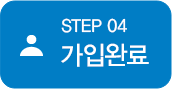
<style>
.page{position:relative;width:172px;height:89px;background:#007dc5}
.page>*{position:absolute;margin:0}
.t1{font:18px "YDVYGO33";color:#ffffff;scale:0.95 1}
.t2{font:26px "YDVYGO33";letter-spacing:-0.025em;color:#ffffff;scale:0.95 1}
</style>
<div class="page">
<p class="t1" style="left:61px;top:18px;width:66px;height:15px">STEP 04</p>
<p class="t2" style="left:61px;top:43px;width:88px;height:24px">가입완료</p>
</div>
